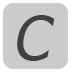
<style>
.page{position:relative;width:72px;height:72px;background:#cbcbcb}
.page>*{position:absolute;margin:0}
.t1{font:60px "Tahoma";color:#404040;text-transform:uppercase;font-style:italic}
</style>
<div class="page">
<p class="t1" style="left:17px;top:15px;width:38px;height:46px">C</p>
</div>
